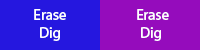
<style>
.page{position:relative;width:200px;height:50px;background:#2517df}
.page>*{position:absolute;margin:0}
.t1{font:15px "MyriadHebrew-Regular";color:#ffffff}
</style>
<div class="page">
<p class="t1" style="left:34px;top:9px;width:32px;height:32px;text-align:center">Erase<br>Dig</p>
<p class="t1" style="left:137px;top:9px;width:32px;height:32px;text-align:center">Erase <br>Dig</p>
</div>
